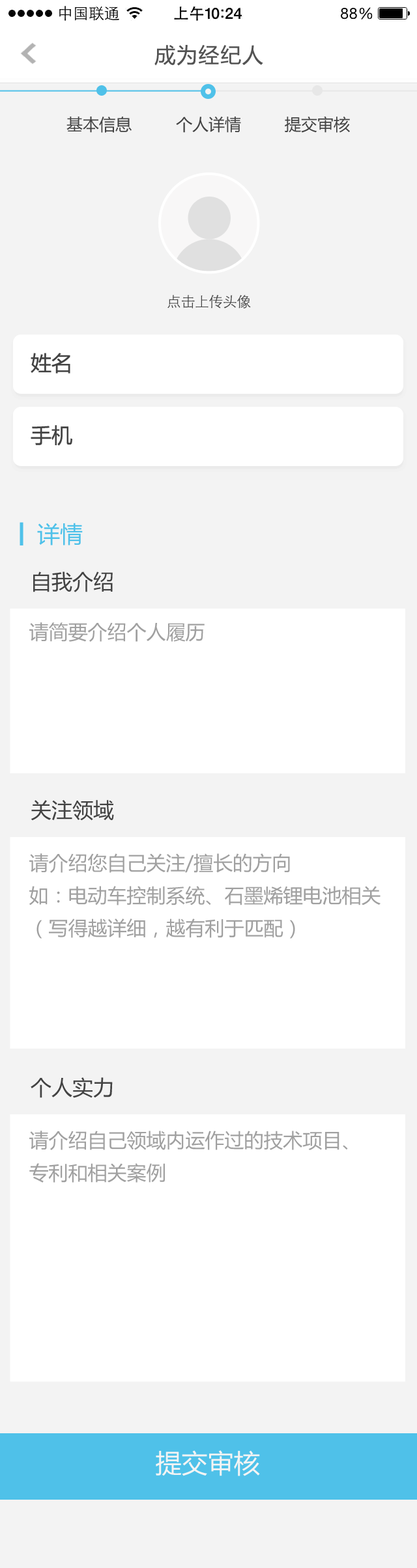
<style>
.page{position:relative;width:417px;height:1568px;background:#ffffff}
.page>*{position:absolute;margin:0}
.t1{font:20.8px "MicrosoftYaHei";letter-spacing:0.05em;color:#535353}
.t2{font:16.3px "MicrosoftYaHei";color:#434343}
.t3{font:14.3px "STXihei";letter-spacing:-0.025em;color:#434343}
.t4{font:20.8px "MicrosoftYaHei";color:#434343}
.t5{font:22.8px "MicrosoftYaHei";color:#4fc1e9}
.t6{font:19.5px "MicrosoftYaHei";color:#a0a0a0}
.t7{font:19.5px/32.5px "MicrosoftYaHei";color:#a0a0a0}
.t8{font:26px "MicrosoftYaHei";color:#f4f4f4}
</style>
<div class="page">
<p class="t1" style="left:154px;top:45px;width:109px;height:21px">成为经纪人</p>
<p class="t2" style="left:66px;top:117px;width:65px;height:16px">基本信息</p>
<p class="t2" style="left:176px;top:117px;width:65px;height:16px">个人详情</p>
<p class="t2" style="left:284px;top:116px;width:66px;height:17px">提交审核</p>
<p class="t3" style="left:167px;top:295px;width:84px;height:14px">点击上传头像</p>
<p class="t4" style="left:31px;top:353px;width:39px;height:21px">姓名</p>
<p class="t4" style="left:31px;top:425px;width:41px;height:21px">手机</p>
<p class="t5" style="left:37px;top:523px;width:46px;height:22px">详情</p>
<p class="t4" style="left:33px;top:571px;width:80px;height:21px">自我介绍</p>
<p class="t6" style="left:29px;top:622px;width:175px;height:20px">请简要介绍个人履历</p>
<p class="t4" style="left:31px;top:800px;width:83px;height:21px">关注领域</p>
<p class="t7" style="left:29px;top:853px;width:351px;height:86px">请介绍您自己关注/擅长的方向<br>如：电动车控制系统、石墨烯锂电池相关<br>（写得越详细，越有利于匹配）</p>
<p class="t4" style="left:31px;top:1077px;width:82px;height:21px">个人实力</p>
<p class="t7" style="left:29px;top:1131px;width:319px;height:52px">请介绍自己领域内运作过的技术项目、<br>专利和相关案例</p>
<p class="t8" style="left:156px;top:1450px;width:104px;height:26px">提交审核</p>
</div>
